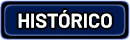
<style>
.page{position:relative;width:130px;height:40px;background:#001850}
.page>*{position:absolute;margin:0}
.t1{font:20px "Barlow-Bold";color:#ffffff}
</style>
<div class="page">
<p class="t1" style="left:18px;top:10px;width:94px;height:18px">HISTÓRICO</p>
</div>
